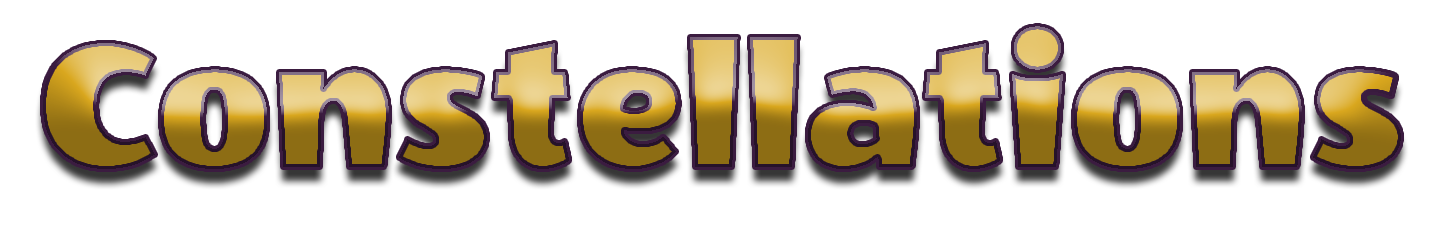
<style>
.page{position:relative;width:1441px;height:229px;background:#ffffff}
.page>*{position:absolute;margin:0}
.t1{font:200px "WendyOne-Regular"}
</style>
<div class="page">
<p class="t1" style="left:43px;top:26px;width:1358px;height:143px">Constellations</p>
</div>
